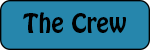
<style>
.page{position:relative;width:150px;height:50px;background:#2686ac}
.page>*{position:absolute;margin:0}
.t1{font:24px "HoboStd";color:#000000}
</style>
<div class="page">
<p class="t1" style="left:23px;top:12px;width:103px;height:21px">The Crew</p>
</div>
